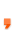
<style>
.page{position:relative;width:15px;height:30px;background:#ffffff}
.page>*{position:absolute;margin:0}
.t1{font:30px "HYb4gj";letter-spacing:0.01em;color:#ff8143}
</style>
<div class="page">
<p class="t1" style="left:4px;top:18px;width:7px;height:11px">，</p>
</div>
